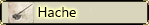
<style>
.page{position:relative;width:149px;height:25px;background:#d9d5bd}
.page>*{position:absolute;margin:0}
.t1{font:14px "LaoUI";color:#000000}
</style>
<div class="page">
<p class="t1" style="left:38px;top:7px;width:38px;height:10px">Hache</p>
</div>
